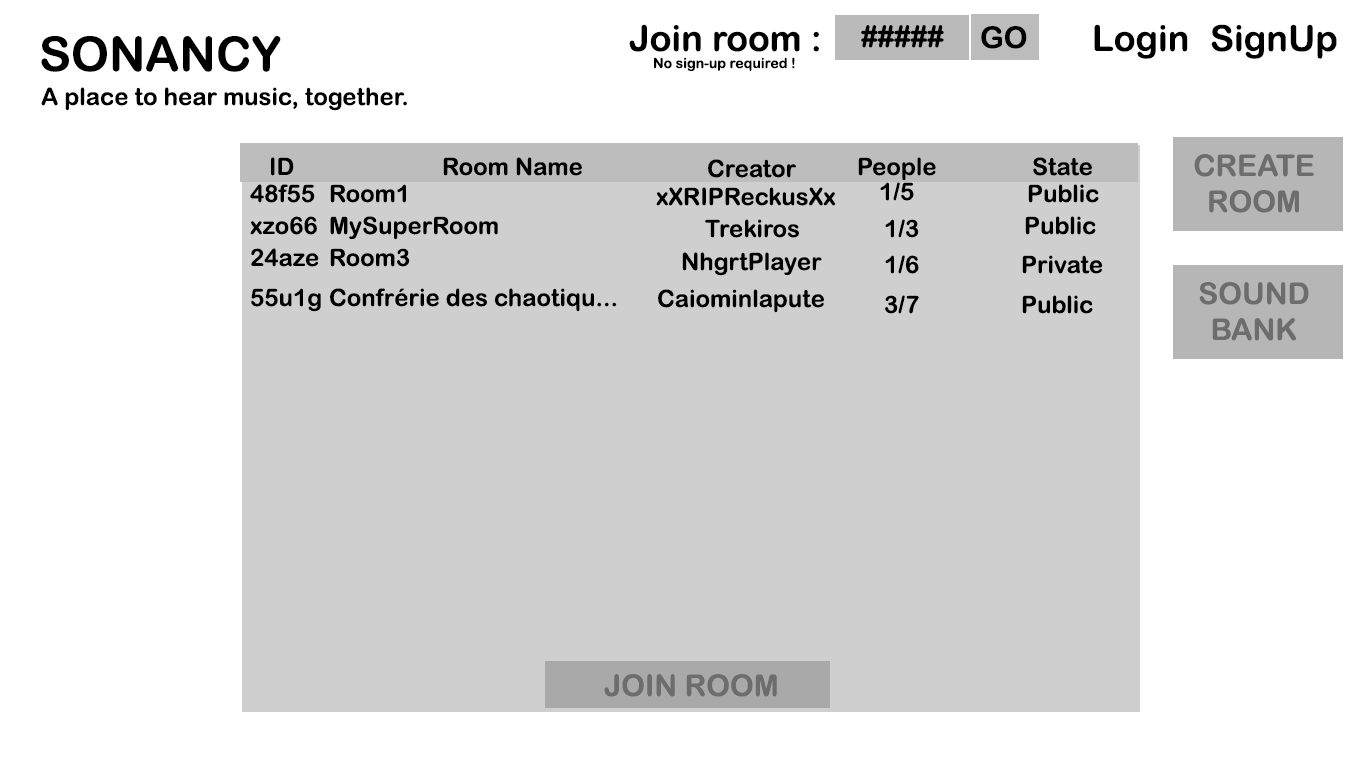
<style>
.page{position:relative;width:1366px;height:768px;background:#ffffff}
.page>*{position:absolute;margin:0}
.t1{font:36px "ArialRoundedMTBold";color:#000000}
.t2{font:30px "ArialRoundedMTBold";color:#000000}
.t3{font:48px "ArialRoundedMTBold";color:#000000}
.t4{font:14px "ArialRoundedMTBold";color:#000000}
.t5{font:24px "ArialRoundedMTBold";color:#000000}
.t6{font:30px "ArialRoundedMTBold";color:#6d6d6d}
</style>
<div class="page">
<p class="t1" style="left:629px;top:24px;width:190px;height:28px">Join room :</p>
<p class="t2" style="left:861px;top:25px;width:83px;height:23px">#####</p>
<p class="t2" style="left:981px;top:26px;width:46px;height:23px">GO</p>
<p class="t1" style="left:1094px;top:24px;width:94px;height:35px">Login</p>
<p class="t1" style="left:1211px;top:24px;width:126px;height:35px">SignUp</p>
<p class="t3" style="left:41px;top:36px;width:240px;height:36px">SONANCY</p>
<p class="t4" style="left:654px;top:57px;width:141px;height:14px">No sign-up required !</p>
<p class="t5" style="left:41px;top:87px;width:366px;height:24px">A place to hear music, together.</p>
<p class="t5" style="left:271px;top:157px;width:23px;height:19px">ID</p>
<p class="t5" style="left:443px;top:157px;width:139px;height:19px">Room Name</p>
<p class="t5" style="left:708px;top:159px;width:89px;height:19px">Creator</p>
<p class="t5" style="left:858px;top:157px;width:78px;height:24px">People</p>
<p class="t5" style="left:1033px;top:157px;width:59px;height:19px">State</p>
<p class="t6" style="left:1194px;top:154px;width:120px;height:59px;text-align:center">CREATE<br>ROOM</p>
<p class="t5" style="left:250px;top:184px;width:65px;height:19px">48f55</p>
<p class="t5" style="left:330px;top:184px;width:76px;height:19px">Room1</p>
<p class="t5" style="left:880px;top:182px;width:34px;height:19px">1/5</p>
<p class="t5" style="left:1028px;top:184px;width:71px;height:19px">Public</p>
<p class="t5" style="left:656px;top:187px;width:180px;height:19px">xXRIPReckusXx</p>
<p class="t5" style="left:250px;top:216px;width:67px;height:19px">xzo66</p>
<p class="t5" style="left:330px;top:216px;width:168px;height:24px">MySuperRoom</p>
<p class="t5" style="left:705px;top:219px;width:94px;height:19px">Trekiros</p>
<p class="t5" style="left:885px;top:219px;width:34px;height:19px">1/3</p>
<p class="t5" style="left:1025px;top:216px;width:71px;height:19px">Public</p>
<p class="t5" style="left:251px;top:248px;width:68px;height:19px">24aze</p>
<p class="t5" style="left:330px;top:248px;width:80px;height:19px">Room3</p>
<p class="t5" style="left:682px;top:252px;width:140px;height:24px">NhgrtPlayer</p>
<p class="t5" style="left:885px;top:255px;width:34px;height:19px">1/6</p>
<p class="t5" style="left:1022px;top:255px;width:81px;height:19px">Private</p>
<p class="t5" style="left:251px;top:288px;width:70px;height:24px">55u1g</p>
<p class="t5" style="left:330px;top:288px;width:287px;height:24px">Confrérie des chaotiqu...</p>
<p class="t5" style="left:658px;top:289px;width:166px;height:24px">Caiominlapute</p>
<p class="t6" style="left:1199px;top:282px;width:110px;height:59px;text-align:center">SOUND<br>BANK</p>
<p class="t5" style="left:885px;top:295px;width:34px;height:19px">3/7</p>
<p class="t5" style="left:1022px;top:295px;width:71px;height:19px">Public</p>
<p class="t6" style="left:604px;top:674px;width:173px;height:23px">JOIN ROOM</p>
</div>
